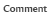
<style>
.page{position:relative;width:51px;height:17px;background:#ffffff}
.page>*{position:absolute;margin:0}
.t1{font:10px "AmiraParadiso";color:#474747}
</style>
<div class="page">
<p class="t1" style="left:3px;top:5px;width:45px;height:7px">Comment</p>
</div>
